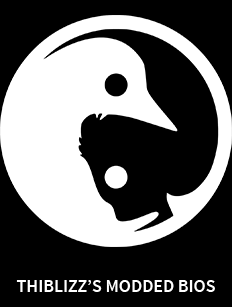
<style>
.page{position:relative;width:232px;height:307px;background:#000000}
.page>*{position:absolute;margin:0}
.t1{font:18px "SourceSansPro-Semibold";color:#ffffff}
</style>
<div class="page">
<p class="t1" style="left:16px;top:280px;width:199px;height:12px">THIBLIZZ’S MODDED BIOS</p>
</div>
